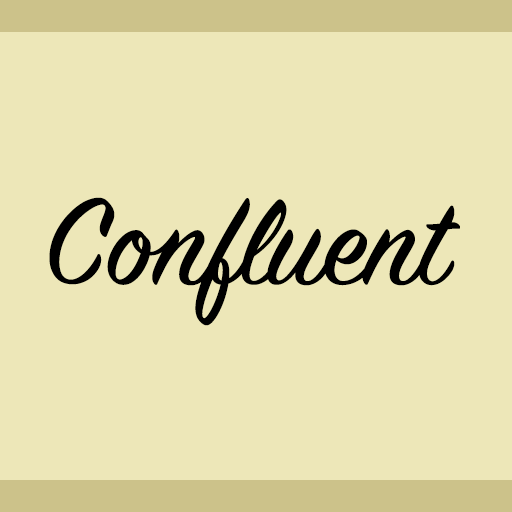
<style>
.page{position:relative;width:512px;height:512px;background:#ede7b8}
.page>*{position:absolute;margin:0}
.t1{font:135px "SignPainter-HouseScript";color:#000000}
</style>
<div class="page">
<p class="t1" style="left:49px;top:197px;width:411px;height:129px">Confluent</p>
</div>
